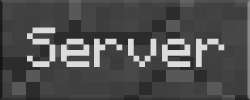
<style>
.page{position:relative;width:250px;height:100px}
.page>*{position:absolute;margin:0}
.t1{font:45px "Minecraftia";color:#dcdcdc}
</style>
<div class="page">
<p class="t1" style="left:27px;top:27px;width:198px;height:40px">Server</p>
</div>
